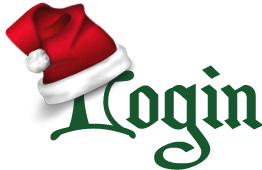
<style>
.page{position:relative;width:262px;height:170px;background:#ffffff}
.page>*{position:absolute;margin:0}
.t1{font:106.9px "ChristmasCardII";color:#16572d}
</style>
<div class="page">
<p class="t1" style="left:50px;top:37px;width:212px;height:133px">Login</p>
</div>
